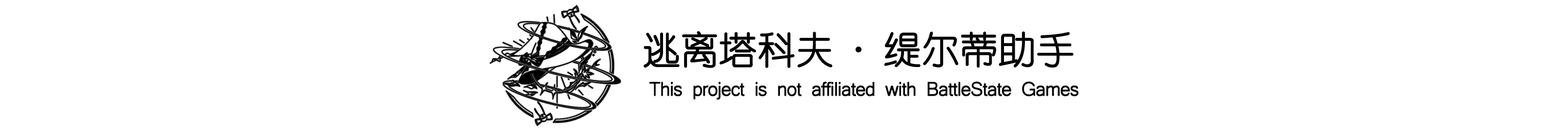
<style>
.page{position:relative;width:1568px;height:131px;background:#ffffff}
.page>*{position:absolute;margin:0}
.t1{font:37.3px "YouYuan";color:#000000;font-weight:bold}
.t2{font:37.3px "MicrosoftYaHei";color:#000000;font-weight:bold}
.t3{font:24.8px "Microsoft-Yi-Baiti";letter-spacing:-0.05em;color:#000000;font-weight:bold}
</style>
<div class="page">
<p class="t1" style="left:644px;top:31px;width:429px;height:37px">逃离塔科夫 <span class="t2">·</span> 缇尔蒂助手</p>
<p class="t3" style="left:649px;top:81px;width:430px;height:19px">This project is not affiliated with BattleState Games</p>
</div>
